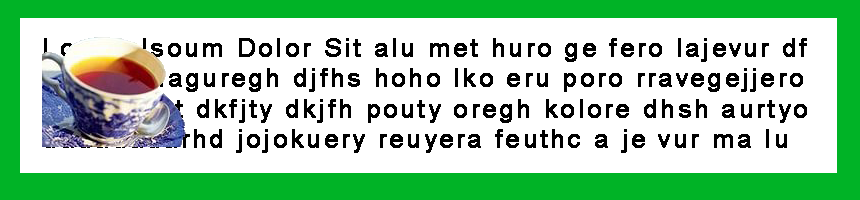
<style>
.page{position:relative;width:860px;height:200px;background:#ffffff}
.page>*{position:absolute;margin:0}
.t1{font:25.4px "ArialMT";letter-spacing:0.09em;color:#000000;font-weight:bold}
</style>
<div class="page">
<p class="t1" style="left:42px;top:38px;width:765px;height:115px">Lorem Isoum Dolor Sit alu met huro ge fero lajevur df<br>fagufe maguregh djfhs hoho lko eru poro rravegejjero<br>fjss leryut dkfjty dkjfh pouty oregh kolore dhsh aurtyo<br>dadadadarhd jojokuery reuyera feuthc a je vur ma lu</p>
</div>
